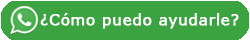
<style>
.page{position:relative;width:250px;height:40px;background:#3ba340}
.page>*{position:absolute;margin:0}
.t1{font:15px "Verdana";letter-spacing:0.03em;color:#ffffff;font-weight:bold}
</style>
<div class="page">
<p class="t1" style="left:40px;top:13px;width:199px;height:16px">¿Cómo puedo ayudarle?</p>
</div>
